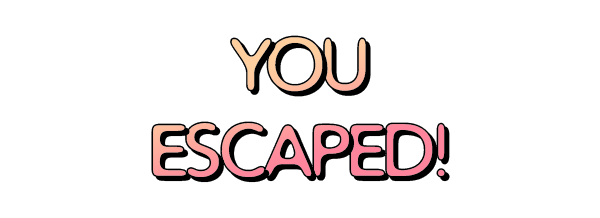
<style>
.page{position:relative;width:600px;height:218px;background:#ffffff}
.page>*{position:absolute;margin:0}
.t1{font:72px "DistroBev";letter-spacing:-0.06em;color:#000000;text-transform:uppercase}
</style>
<div class="page">
<p class="t1" style="left:151px;top:35px;width:299px;height:148px;text-align:center">YOU<br>ESCAPED!</p>
</div>
